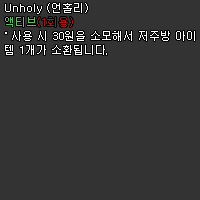
<style>
.page{position:relative;width:200px;height:200px;background:#333333}
.page>*{position:absolute;margin:0}
.t1{font:11px/14px "Dotum";color:#ffffff}
.t2{font:11px/14px "Dotum";color:#56c45b}
.t3{font:11px/14px "Dotum";color:#be0b0f}
</style>
<div class="page">
<p class="t1" style="left:5px;top:3px;width:190px;height:52px">Unholy (언홀리)<br><span class="t2">액티브</span><span class="t3">(1회용)<br></span>˚ 사용 시 30원을 소모해서 저주방 아이<br>템 1개가 소환됩니다.</p>
</div>
